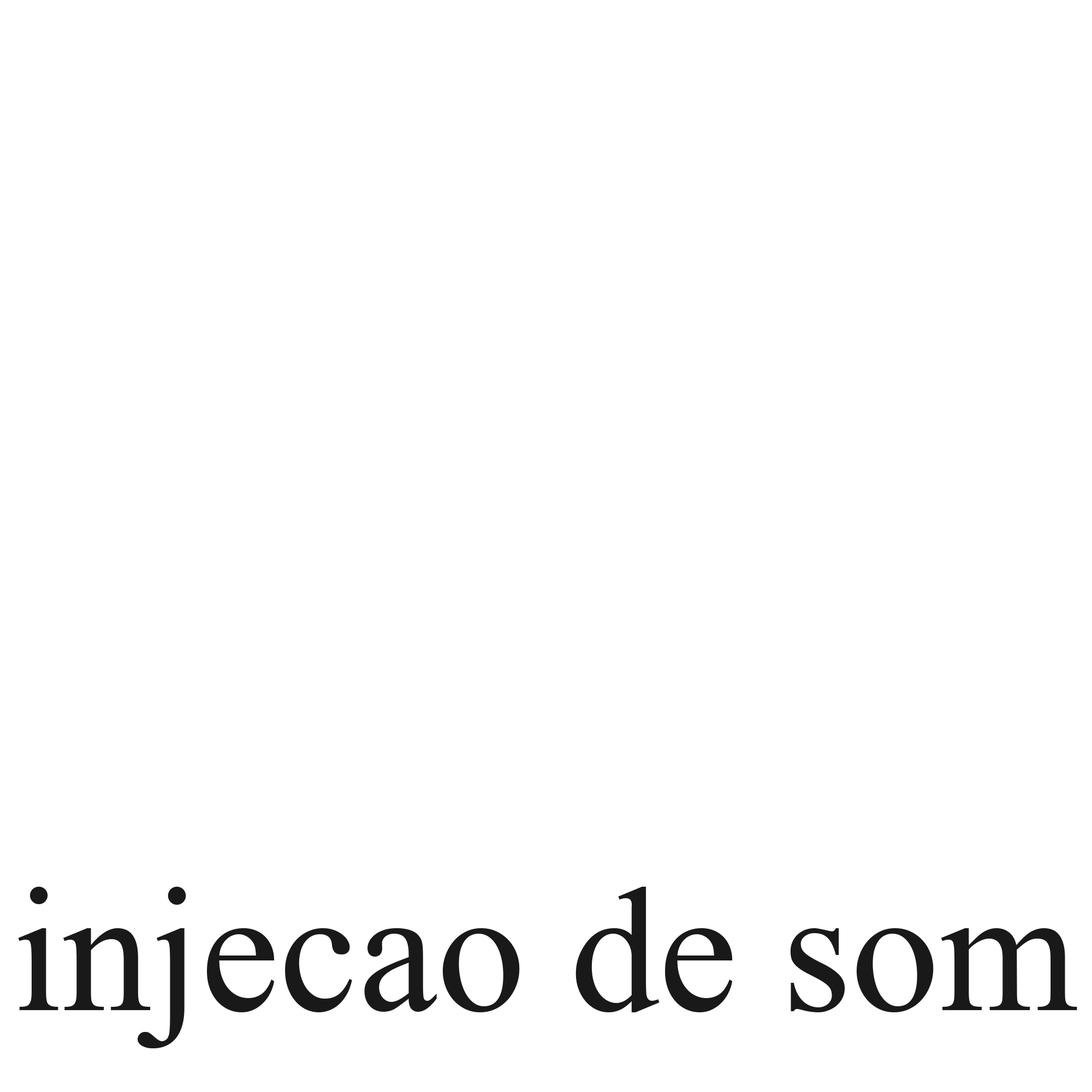
<style>
.page{position:relative;width:1092px;height:1092px;background:#ffffff}
.page>*{position:absolute;margin:0}
.t1{font:177.4px "MongolianBaiti";color:#191919}
</style>
<div class="page">
<p class="t1" style="left:18px;top:887px;width:1059px;height:161px">injecao de som</p>
</div>
